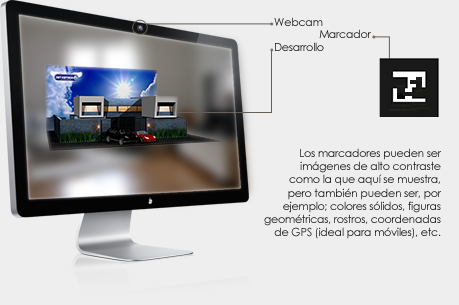
<style>
.page{position:relative;width:459px;height:305px;background:#eeeeee}
.page>*{position:absolute;margin:0}
.t1{font:11px "CenturyGothic";letter-spacing:-0.025em;color:#1a1a1a}
</style>
<div class="page">
<p class="t1" style="left:274px;top:17px;width:49px;height:9px">Webcam</p>
<p class="t1" style="left:319px;top:29px;width:52px;height:9px">Marcador</p>
<p class="t1" style="left:275px;top:42px;width:49px;height:9px">Desarrollo</p>
<p class="t1" style="left:264px;top:148px;width:178px;height:91px;text-align:right">Los marcadores pueden ser<br>imágenes de alto contraste<br>como la que aquí se muestra,<br>pero también pueden ser, por<br>ejemplo; colores sólidos, figuras<br>geométricas, rostros, coordenadas<br>de GPS (ideal para móviles), etc.</p>
</div>
